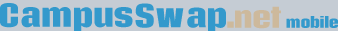
<style>
.page{position:relative;width:338px;height:31px;background:#c5ccd4}
.page>*{position:absolute;margin:0}
.t1{font:30px "Coda-Heavy";letter-spacing:-0.05em;color:#3399cc}
.t2{font:27px "Coda-Heavy";letter-spacing:-0.05em;color:#cdb99c}
.t3{font:14px "Coda-Heavy";letter-spacing:-0.05em;color:#3399cc}
</style>
<div class="page">
<p class="t1" style="left:0px;top:3px;width:133px;height:30px">Campus</p>
<p class="t2" style="left:227px;top:6px;width:54px;height:23px">.net</p>
<p class="t3" style="left:286px;top:16px;width:52px;height:12px">mobile</p>
</div>
